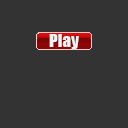
<style>
.page{position:relative;width:128px;height:128px;background:#333333}
.page>*{position:absolute;margin:0}
.t1{font:17.5px "Impact";color:#f3f3f3}
</style>
<div class="page">
<p class="t1" style="left:49px;top:34px;width:30px;height:15px">Play</p>
</div>
